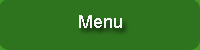
<style>
.page{position:relative;width:200px;height:50px;background:#2e741e}
.page>*{position:absolute;margin:0}
.t1{font:18px "ArialMT";color:#f6f6f6}
</style>
<div class="page">
<p class="t1" style="left:79px;top:15px;width:43px;height:13px">Menu</p>
</div>
